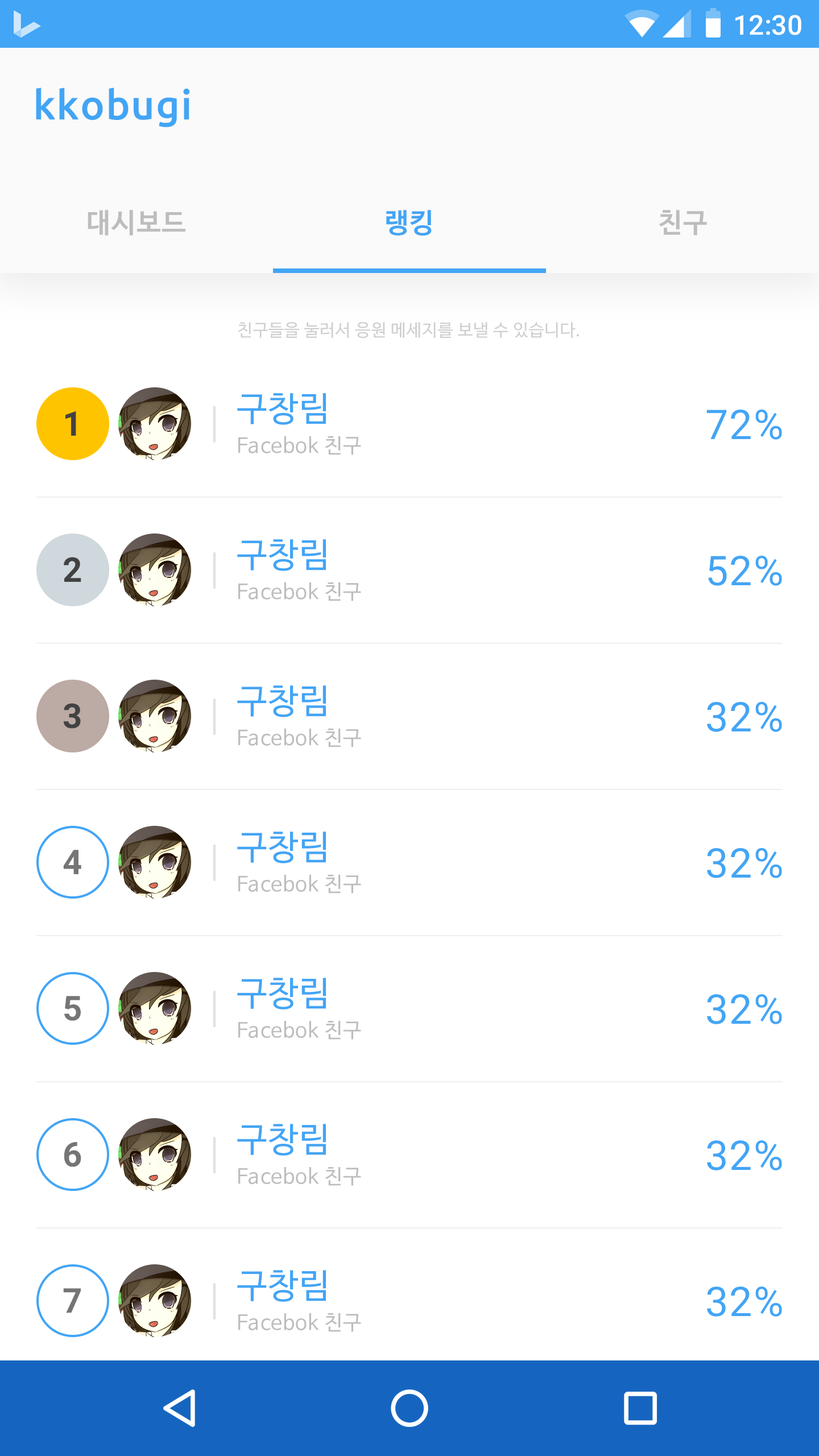
<style>
.page{position:relative;width:819px;height:1456px;background:#ffffff}
.page>*{position:absolute;margin:0}
.t1{font:27.3px "Roboto-Medium";color:#ffffff}
.t2{font:40.9px "Ubuntu-Medium";letter-spacing:0.025em;color:#42a5f5}
.t3{font:27.3px "NanumBarunGothicBold";letter-spacing:0.025em;color:#bdbdbd}
.t4{font:27.3px "NanumBarunGothicBold";letter-spacing:0.025em;color:#42a5f5}
.t5{font:17.1px "NanumBarunGothic";letter-spacing:0.025em;color:#cfcfcf}
.t6{font:34.1px "NanumBarunGothic";letter-spacing:0.025em;color:#42a5f5}
.t7{font:34.1px "Roboto-Bold";letter-spacing:0.025em;color:#424242}
.t8{font:40.9px "Roboto-Regular";letter-spacing:0.025em;color:#42a5f5}
.t9{font:20.5px "NanumBarunGothic";letter-spacing:0.025em;color:#bdbdbd}
.t10{font:34.1px "Roboto-Bold";letter-spacing:0.025em;color:#757575}
</style>
<div class="page">
<p class="t1" style="left:735px;top:15px;width:66px;height:20px">12:30</p>
<p class="t2" style="left:36px;top:88px;width:154px;height:39px">kkobugi</p>
<p class="t3" style="left:88px;top:210px;width:97px;height:25px">대시보드</p>
<p class="t4" style="left:386px;top:210px;width:46px;height:26px">랭킹</p>
<p class="t3" style="left:659px;top:210px;width:48px;height:25px">친구</p>
<p class="t5" style="left:238px;top:322px;width:341px;height:16px">친구들을 눌러서 응원 메세지를 보낼 수 있습니다.</p>
<p class="t6" style="left:237px;top:393px;width:89px;height:32px">구창림</p>
<p class="t7" style="left:65px;top:411px;width:11px;height:25px">1</p>
<p class="t8" style="left:706px;top:409px;width:76px;height:31px">72%</p>
<p class="t9" style="left:238px;top:436px;width:123px;height:19px">Facebok 친구</p>
<p class="t6" style="left:237px;top:539px;width:89px;height:32px">구창림</p>
<p class="t7" style="left:64px;top:557px;width:17px;height:25px">2</p>
<p class="t8" style="left:708px;top:556px;width:74px;height:30px">52%</p>
<p class="t9" style="left:238px;top:582px;width:123px;height:19px">Facebok 친구</p>
<p class="t6" style="left:237px;top:685px;width:89px;height:32px">구창림</p>
<p class="t8" style="left:707px;top:702px;width:75px;height:30px">32%</p>
<p class="t7" style="left:64px;top:703px;width:17px;height:26px">3</p>
<p class="t9" style="left:238px;top:729px;width:123px;height:18px">Facebok 친구</p>
<p class="t6" style="left:237px;top:832px;width:89px;height:31px">구창림</p>
<p class="t10" style="left:63px;top:850px;width:18px;height:24px">4</p>
<p class="t8" style="left:707px;top:848px;width:75px;height:30px">32%</p>
<p class="t9" style="left:238px;top:875px;width:123px;height:18px">Facebok 친구</p>
<p class="t6" style="left:237px;top:978px;width:89px;height:32px">구창림</p>
<p class="t10" style="left:64px;top:996px;width:17px;height:25px">5</p>
<p class="t8" style="left:707px;top:994px;width:75px;height:30px">32%</p>
<p class="t9" style="left:238px;top:1021px;width:123px;height:19px">Facebok 친구</p>
<p class="t6" style="left:237px;top:1124px;width:89px;height:32px">구창림</p>
<p class="t10" style="left:64px;top:1142px;width:17px;height:25px">6</p>
<p class="t8" style="left:707px;top:1140px;width:75px;height:30px">32%</p>
<p class="t9" style="left:238px;top:1167px;width:123px;height:19px">Facebok 친구</p>
<p class="t6" style="left:237px;top:1270px;width:89px;height:32px">구창림</p>
<p class="t10" style="left:63px;top:1288px;width:18px;height:25px">7</p>
<p class="t8" style="left:707px;top:1286px;width:75px;height:31px">32%</p>
<p class="t9" style="left:238px;top:1313px;width:123px;height:19px">Facebok 친구</p>
</div>
